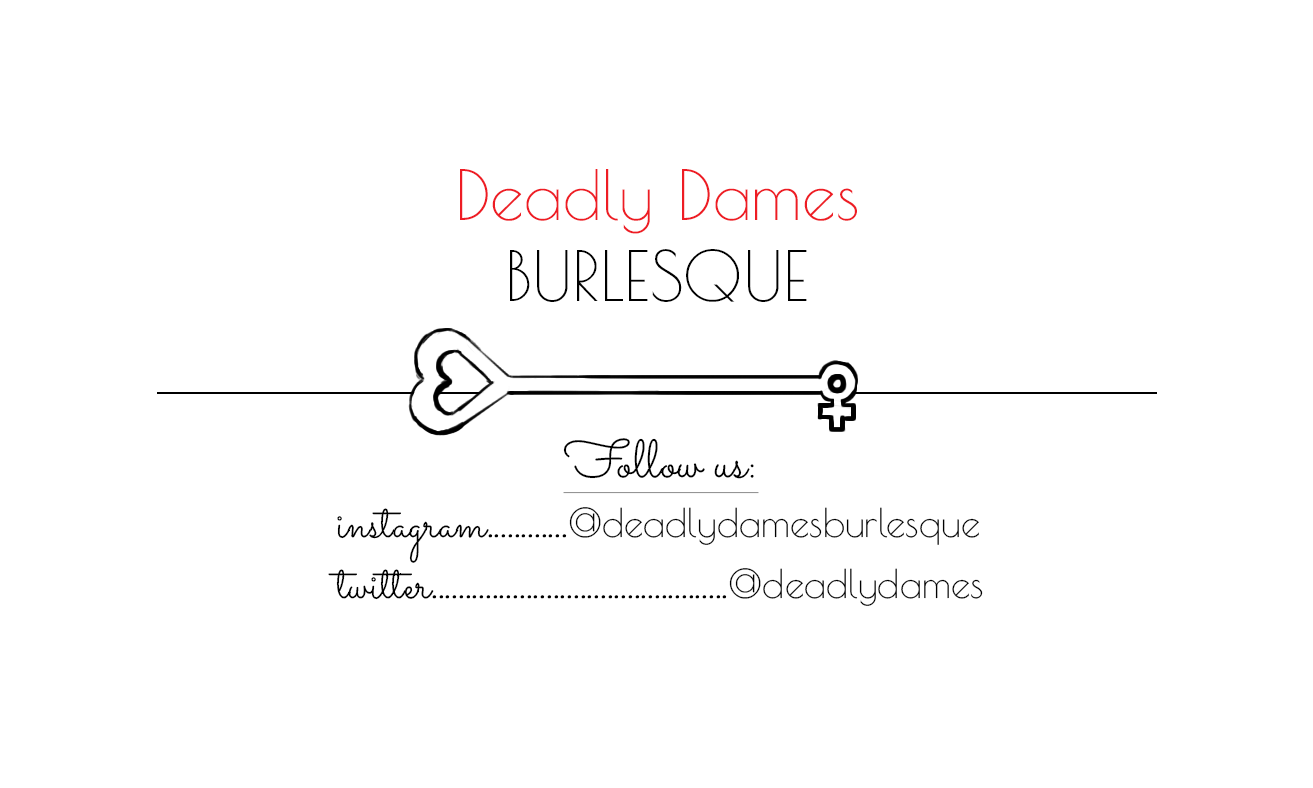
<style>
.page{position:relative;width:1313px;height:788px;background:#ffffff}
.page>*{position:absolute;margin:0}
.t1{font:68.1px "PoiretOne-Regular";color:#ee1c24}
.t2{font:68.1px "PoiretOne-Regular";color:#000000;text-transform:uppercase}
.t3{font:48.6px "PoiretOne-Regular";color:#000000}
.t4{font:53.5px "Sacramento-Regular";color:#000000;text-decoration:underline}
.t5{font:48.6px "Sacramento-Regular";color:#000000}
.t6{font:38.9px "PoiretOne-Regular";color:#000000}
</style>
<div class="page">
<p class="t1" style="left:460px;top:169px;width:397px;height:133px;text-align:center">Deadly Dames<br><span class="t2">Burlesque</span></p>
<p class="t3" style="left:328px;top:438px;width:655px;height:168px;text-align:center"><span class="t4">Follow us:<br></span><span class="t5">instagram</span>............<span class="t6">@deadlydamesburlesque<br></span><span class="t5">twitter</span>............................................<span class="t6">@deadlydames</span></p>
</div>
